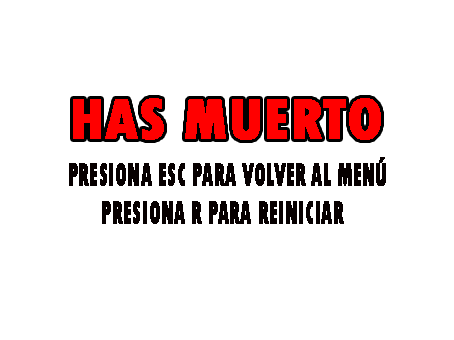
<style>
.page{position:relative;width:454px;height:340px;background:#ffffff}
.page>*{position:absolute;margin:0}
.t1{font:60px "TwCenMT-CondensedExtraBold";color:#ff0000;font-weight:bold}
.t2{font:33.7px "TwCenMT-CondensedExtraBold";color:#070000;font-weight:bold;scale:0.61 1}
.t3{font:33.6px "TwCenMT-CondensedExtraBold";color:#070000;font-weight:bold;scale:0.62 1}
</style>
<div class="page">
<p class="t1" style="left:73px;top:98px;width:308px;height:42px">HAS MUERTO</p>
<p class="t2" style="left:69px;top:157px;width:317px;height:29px">PRESIONA ESC PARA VOLVER AL MENÚ</p>
<p class="t3" style="left:102px;top:201px;width:242px;height:23px">PRESIONA R PARA REINICIAR</p>
</div>
